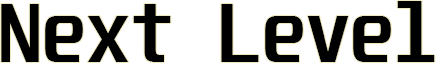
<style>
.page{position:relative;width:436px;height:63px;background:#ffffff}
.page>*{position:absolute;margin:0}
.t1{font:72px "Unispace-Bold";color:#000000}
</style>
<div class="page">
<p class="t1" style="left:1px;top:1px;width:434px;height:61px">Next Level</p>
</div>
